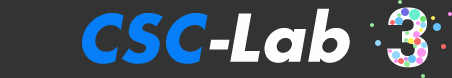
<style>
.page{position:relative;width:452px;height:78px;background:#333333}
.page>*{position:absolute;margin:0}
.t1{font:64px "Futura-Bold";color:#057ef7;font-style:italic}
.t2{font:64px "Futura-Bold";color:#fefefe;font-style:italic}
</style>
<div class="page">
<p class="t1" style="left:82px;top:13px;width:126px;height:51px">CSC</p>
<p class="t2" style="left:209px;top:8px;width:141px;height:55px">-Lab</p>
</div>
